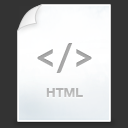
<style>
.page{position:relative;width:128px;height:128px;background:#333333}
.page>*{position:absolute;margin:0}
.t1{font:38px "Lato-Bold";color:#aaaaaa}
.t2{font:13px "HelveticaNeue-Bold";color:#cccccc}
</style>
<div class="page">
<p class="t1" style="left:37px;top:43px;width:55px;height:30px">&lt;/&gt;</p>
<p class="t2" style="left:46px;top:88px;width:37px;height:9px">HTML</p>
</div>
